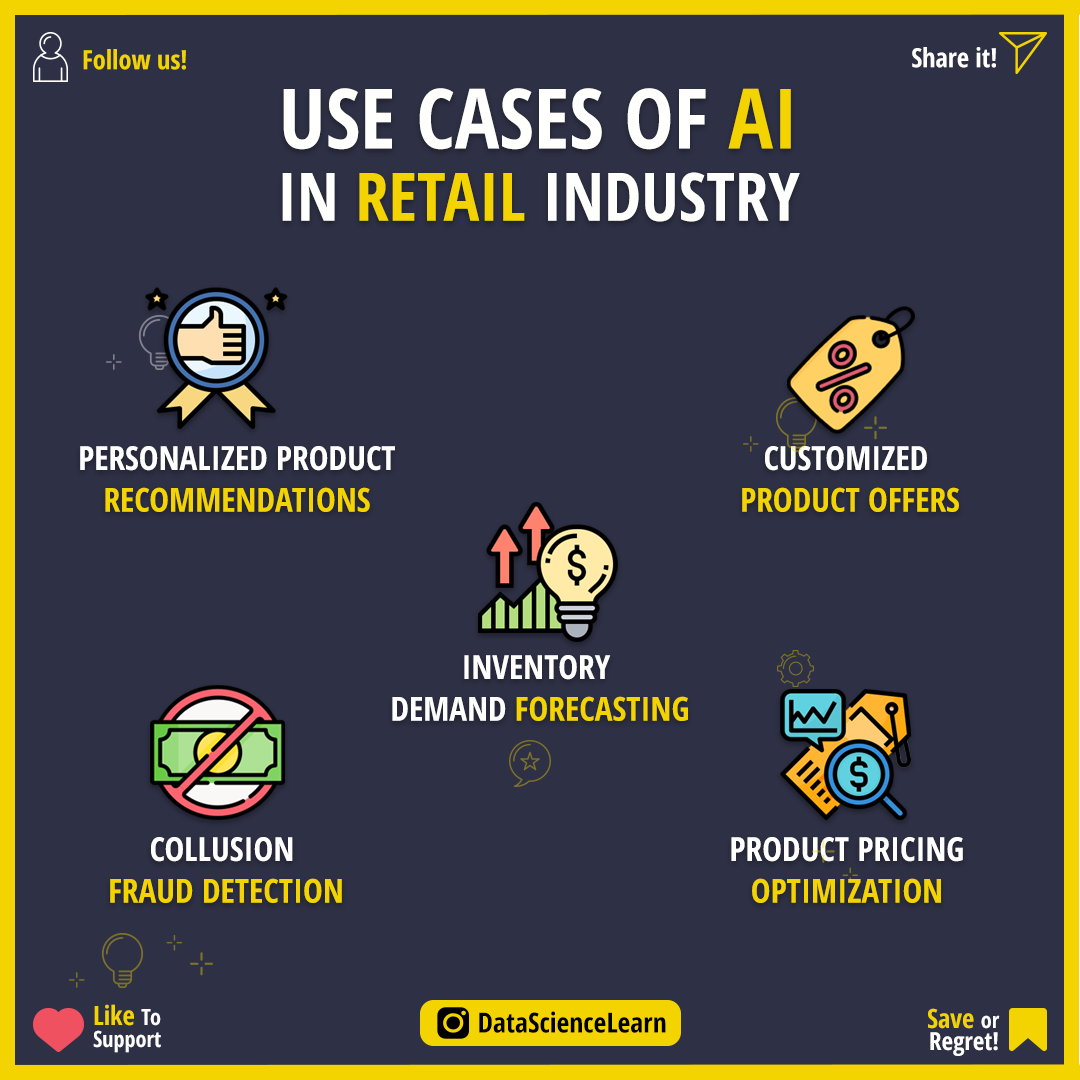
<style>
.page{position:relative;width:1080px;height:1080px;background:#2e3045}
.page>*{position:absolute;margin:0}
.t1{font:26.4px "OpenSans-CondensedBold";color:#f3d400}
.t2{font:26.4px "OpenSans-CondensedBold";color:#ffffff}
.t3{font:83.3px/72.2px "OpenSans-CondensedBold";color:#fffffe}
.t4{font:83.3px/72.2px "OpenSans-CondensedBold";color:#f3d400}
.t5{font:66.7px/72.2px "OpenSans-CondensedBold";color:#fffffe}
.t6{font:66.7px/72.2px "OpenSans-CondensedBold";color:#f3d400}
.t7{font:33.3px/41.7px "OpenSans-CondensedBold";color:#ffffff}
.t8{font:33.3px/41.7px "OpenSans-CondensedBold";color:#f3d400}
.t9{font:22.2px/22.2px "OpenSans-CondensedBold";color:#ffffff}
.t10{font:26.4px/22.2px "OpenSans-CondensedBold";color:#f3d400}
.t11{font:27.8px "OpenSans-CondensedBold";color:#000000}
.t12{font:25px/22.2px "OpenSans-CondensedBold";color:#ffffff}
</style>
<div class="page">
<p class="t1" style="left:83px;top:49px;width:103px;height:21px">Follow us!</p>
<p class="t2" style="left:912px;top:47px;width:84px;height:21px">Share it!</p>
<p class="t3" style="left:282px;top:88px;width:518px;height:134px;text-align:center">USE CASES OF <span class="t4">AI<br></span><span class="t5">IN </span><span class="t6">RETAIL </span><span class="t5">INDUSTRY</span></p>
<p class="t7" style="left:80px;top:446px;width:315px;height:66px;text-align:center">PERSONALIZED PRODUCT<br><span class="t8">RECOMMENDATIONS</span></p>
<p class="t8" style="left:742px;top:446px;width:217px;height:66px;text-align:center"><span class="t7">CUSTOMIZED <br></span>PRODUCT OFFERS</p>
<p class="t7" style="left:392px;top:655px;width:296px;height:66px;text-align:center">INVENTORY <br>DEMAND <span class="t8">FORECASTING</span></p>
<p class="t8" style="left:110px;top:837px;width:232px;height:66px;text-align:center"><span class="t7">COLLUSION <br></span>FRAUD DETECTION</p>
<p class="t7" style="left:731px;top:837px;width:232px;height:66px;text-align:center">PRODUCT PRICING<br><span class="t8">OPTIMIZATION</span></p>
<p class="t9" style="left:93px;top:1004px;width:68px;height:49px"><span class="t10">Like </span>To<br>Support</p>
<p class="t11" style="left:479px;top:1011px;width:187px;height:22px">DataScienceLearn</p>
<p class="t12" style="left:928px;top:1008px;width:72px;height:48px;text-align:right"><span class="t10">Save </span><span class="t9">or<br></span>Regret!</p>
</div>
